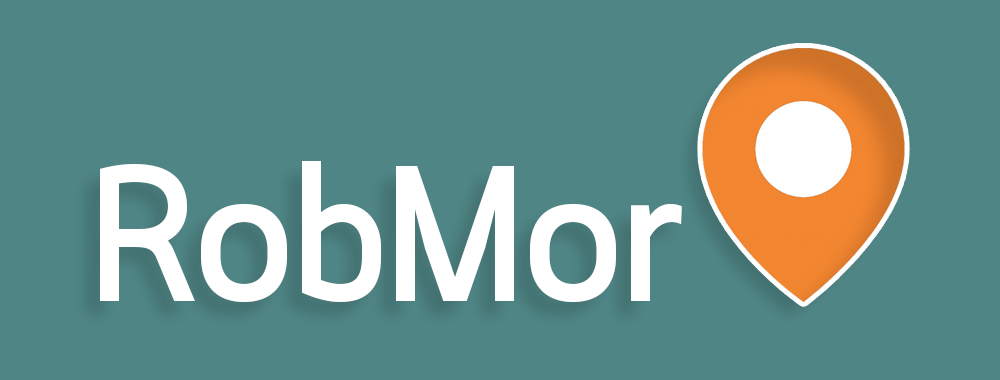
<style>
.page{position:relative;width:1000px;height:380px;background:#508585}
.page>*{position:absolute;margin:0}
.t1{font:190.5px "Quark-Bold";color:#ffffff}
</style>
<div class="page">
<p class="t1" style="left:100px;top:161px;width:582px;height:141px">RobMor</p>
</div>
